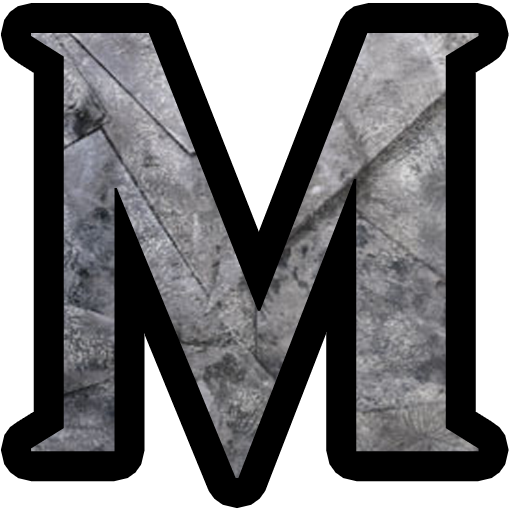
<style>
.page{position:relative;width:512px;height:512px;background:#000000}
.page>*{position:absolute;margin:0}
.t1{font:597.1px "Beleren-Bold"}
</style>
<div class="page">
<p class="t1" style="left:31px;top:33px;width:448px;height:445px">M</p>
</div>
